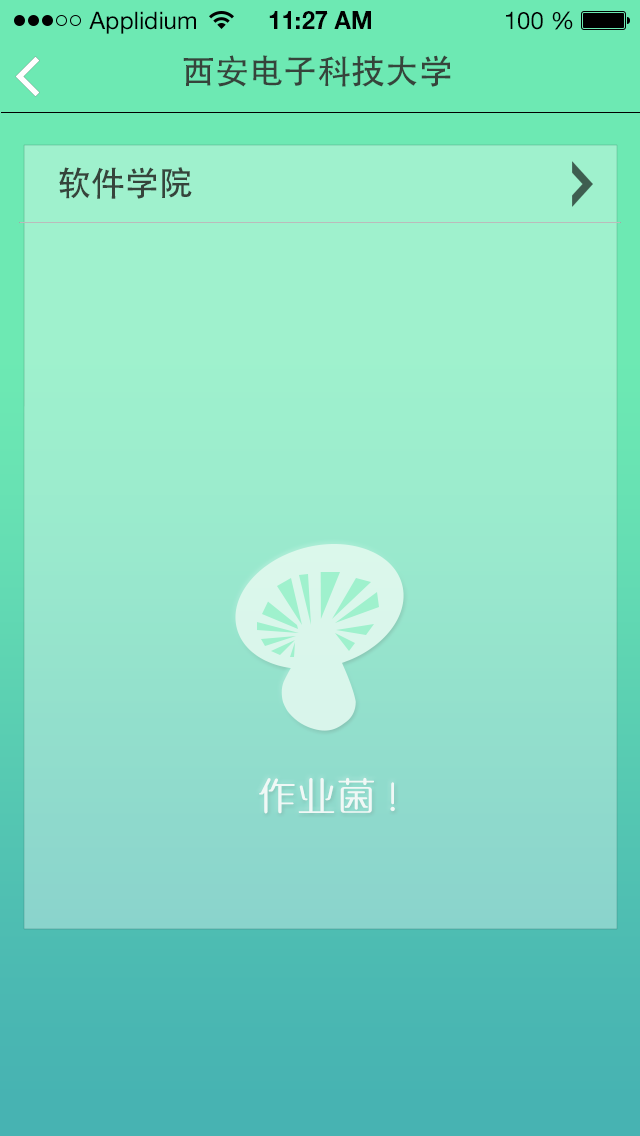
<style>
.page{position:relative;width:640px;height:1136px}
.page>*{position:absolute;margin:0}
.t1{font:24px "HelveticaNeueLTStd-Roman";color:#000000}
.t2{font:24px "HelveticaNeueLTStd-Bd";color:#000000}
.t3{font:34px "AdobeHeitiStd-Regular";color:#36443b}
.t4{font:36px "MFYaYuan_Noncommercial-Regular";letter-spacing:0.1em;color:#fbfbfb}
</style>
<div class="page">
<p class="t1" style="left:89px;top:11px;width:107px;height:23px">Applidium</p>
<p class="t2" style="left:269px;top:11px;width:102px;height:18px">11:27 AM</p>
<p class="t1" style="left:506px;top:11px;width:67px;height:19px">100 %</p>
<p class="t3" style="left:183px;top:55px;width:268px;height:32px">西安电子科技大学</p>
<p class="t3" style="left:59px;top:167px;width:133px;height:32px">软件学院</p>
<p class="t4" style="left:259px;top:777px;width:136px;height:37px;opacity:0.86">作业菌 !</p>
</div>
